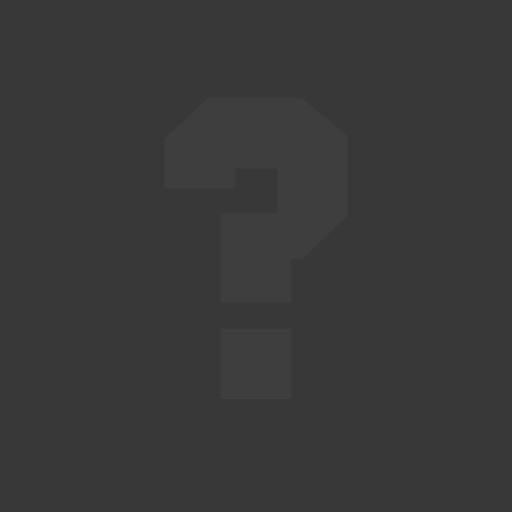
<style>
.page{position:relative;width:512px;height:512px;background:#383838}
.page>*{position:absolute;margin:0}
.t1{font:500px "MutantAcademyBB";letter-spacing:0.1em;color:#3e3e3e}
</style>
<div class="page">
<p class="t1" style="left:164px;top:98px;width:184px;height:301px">?</p>
</div>
